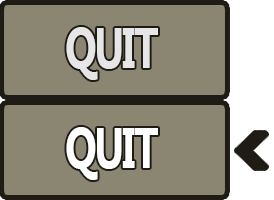
<style>
.page{position:relative;width:274px;height:200px;background:#8a8671}
.page>*{position:absolute;margin:0}
.t1{font:57.3px "Gadugi-Bold";letter-spacing:-0.05em;color:#e6e6e6;scale:0.73 1}
.t2{font:57.3px "Gadugi-Bold";letter-spacing:-0.05em;color:#ffffff;scale:0.73 1}
</style>
<div class="page">
<p class="t1" style="left:66px;top:27px;width:92px;height:53px">QUIT</p>
<p class="t2" style="left:66px;top:127px;width:92px;height:53px">QUIT</p>
</div>
